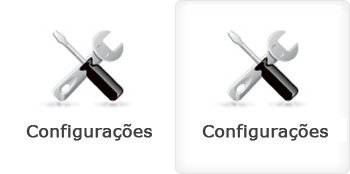
<style>
.page{position:relative;width:350px;height:174px;background:#ffffff}
.page>*{position:absolute;margin:0}
.t1{font:17px "Verdana";color:#404040;font-weight:bold}
</style>
<div class="page">
<p class="t1" style="left:26px;top:124px;width:126px;height:17px">Configurações</p>
<p class="t1" style="left:202px;top:124px;width:126px;height:17px">Configurações</p>
</div>
